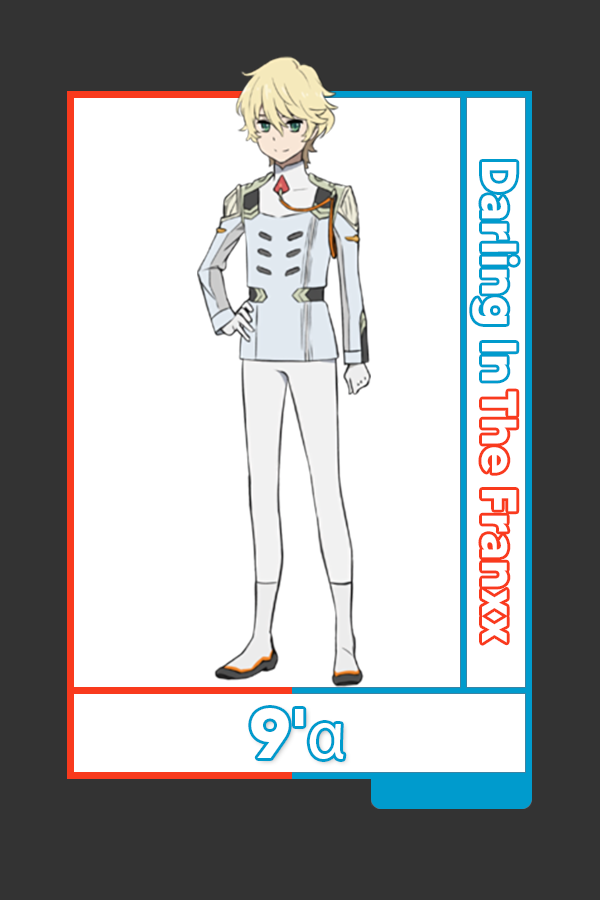
<style>
.page{position:relative;width:600px;height:900px;background:#ffffff}
.page>*{position:absolute;margin:0}
.t1{font:48.8px "MADETOMMY-Bold";color:#ffffff}
.t2{font:70.1px "MADETOMMY-Bold";color:#ffffff}
.t3{font:70.1px "MyriadPro-Regular";color:#ffffff}
</style>
<div class="page">
<p class="t1" style="left:472px;top:162px;width:46px;height:219px;rotate:90deg">Darling In</p>
<p class="t1" style="left:481px;top:391px;width:36px;height:252px;rotate:90deg">The Franxx</p>
<p class="t2" style="left:251px;top:708px;width:93px;height:51px">9'<span class="t3">α</span></p>
</div>
